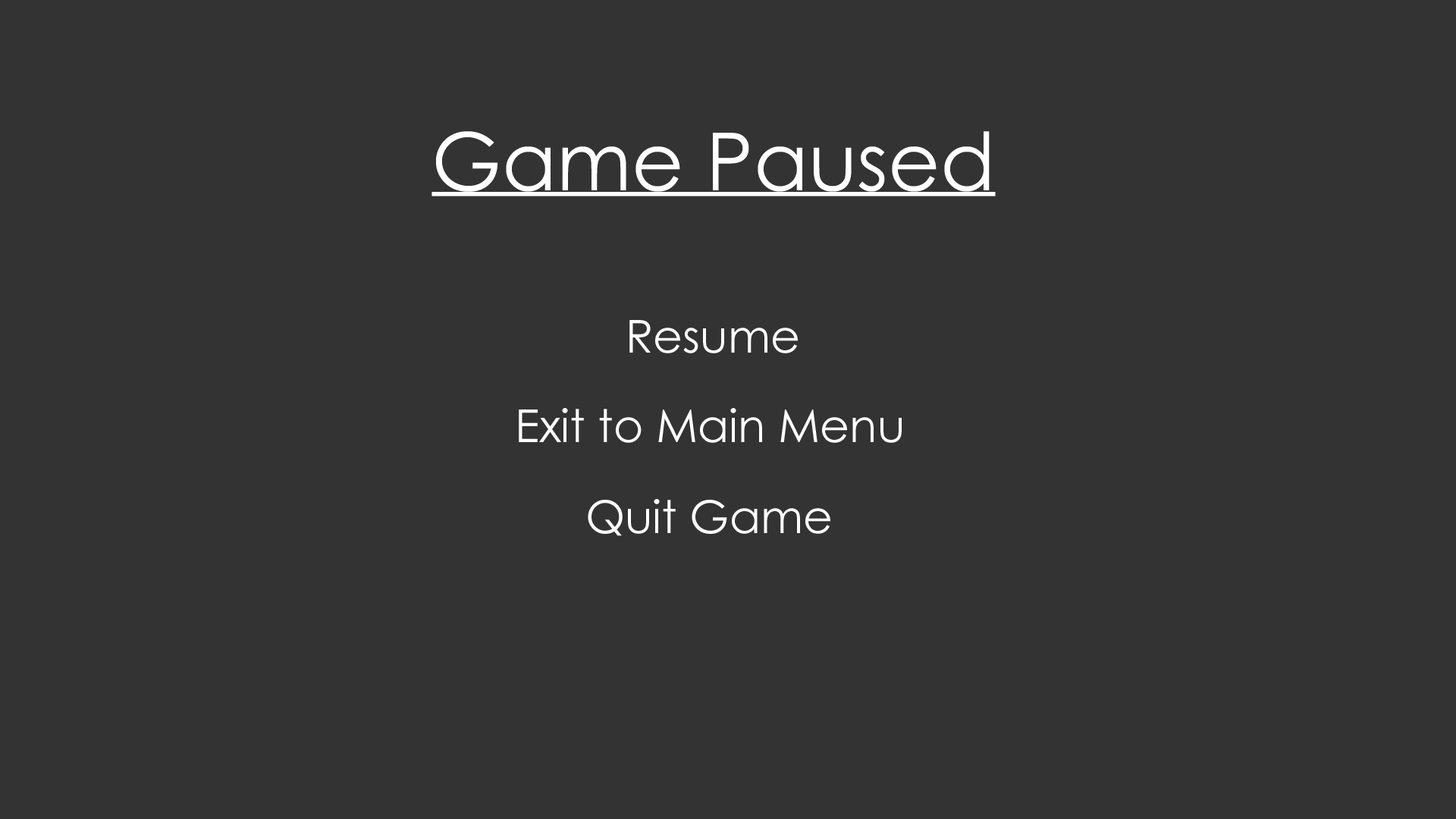
<style>
.page{position:relative;width:1456px;height:819px;background:#333333}
.page>*{position:absolute;margin:0}
.t1{font:80.2px "CenturyGothic";color:#ffffff}
.t2{font:45.5px "CenturyGothic";color:#ffffff}
</style>
<div class="page">
<p class="t1" style="left:436px;top:131px;width:554px;height:61px">Game Paused</p>
<p class="t2" style="left:629px;top:320px;width:169px;height:33px">Resume</p>
<p class="t2" style="left:519px;top:408px;width:383px;height:35px">Exit to Main Menu</p>
<p class="t2" style="left:588px;top:499px;width:242px;height:37px">Quit Game</p>
</div>
